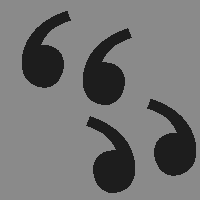
<style>
.page{position:relative;width:200px;height:200px;background:#8a8a8a}
.page>*{position:absolute;margin:0}
.t1{font:269.5px "CopperplateGothic-Bold";color:#1d1d1d}
</style>
<div class="page">
<p class="t1" style="left:22px;top:11px;width:110px;height:94px;rotate:16deg">“</p>
<p class="t1" style="left:86px;top:99px;width:110px;height:94px;rotate:164deg">“</p>
</div>
